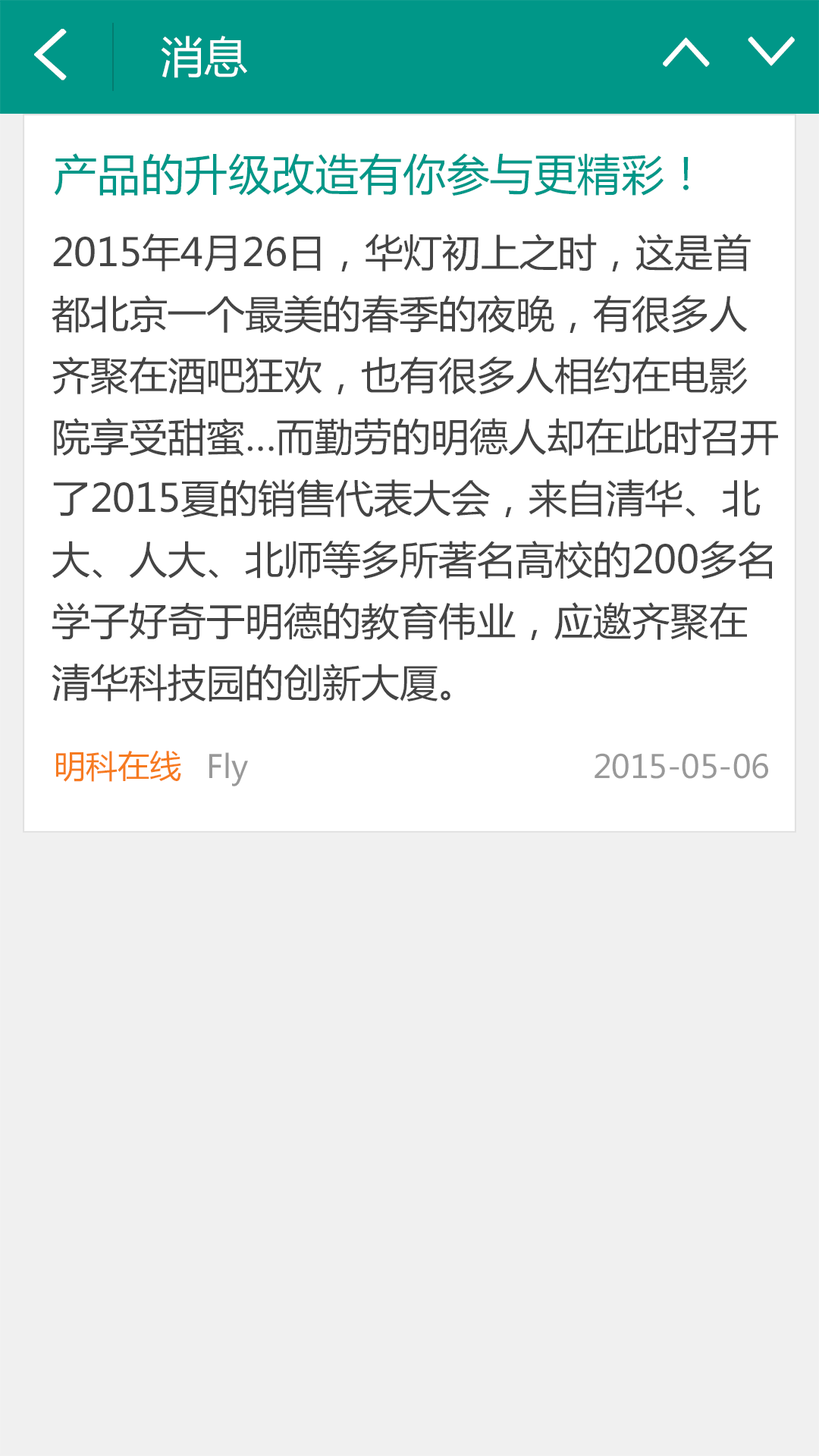
<style>
.page{position:relative;width:819px;height:1456px;background:#f0f0f0}
.page>*{position:absolute;margin:0}
.t1{font:70.5px "SimHei";color:#ffffff;font-weight:bold}
.t2{font:43.2px "MicrosoftYaHei";color:#ffffff}
.t3{font:63.7px "SimHei";color:#ffffff;font-weight:bold}
.t4{font:43.2px "MicrosoftYaHei";letter-spacing:0.01em;color:#009788}
.t5{font:38.7px/61.4px "MicrosoftYaHei";color:#444444}
.t6{font:31.8px "MicrosoftYaHei";color:#f67b20}
.t7{font:31.8px "MicrosoftYaHei";color:#999999}
</style>
<div class="page">
<p class="t1" style="left:34px;top:29px;width:33px;height:51px">&lt;</p>
<p class="t2" style="left:161px;top:36px;width:86px;height:42px">消息</p>
<p class="t3" style="left:663px;top:37px;width:47px;height:30px;rotate:90deg">&lt;</p>
<p class="t3" style="left:748px;top:36px;width:47px;height:30px;rotate:-90deg">&lt;</p>
<p class="t4" style="left:54px;top:153px;width:635px;height:43px">产品的升级改造有你参与更精彩！</p>
<p class="t5" style="left:52px;top:234px;width:726px;height:468px">2015年4月26日，华灯初上之时，这是首都北京一个最美的春季的夜晚，有很多人齐聚在酒吧狂欢，也有很多人相约在电影院享受甜蜜…而勤劳的明德人却在此时召开了2015夏的销售代表大会，来自清华、北大、人大、北师等多所著名高校的200多名学子好奇于明德的教育伟业，应邀齐聚在清华科技园的创新大厦。</p>
<p class="t6" style="left:56px;top:750px;width:125px;height:32px">明科在线</p>
<p class="t7" style="left:209px;top:752px;width:39px;height:34px">Fly</p>
<p class="t7" style="left:595px;top:753px;width:173px;height:26px">2015-05-06</p>
</div>
